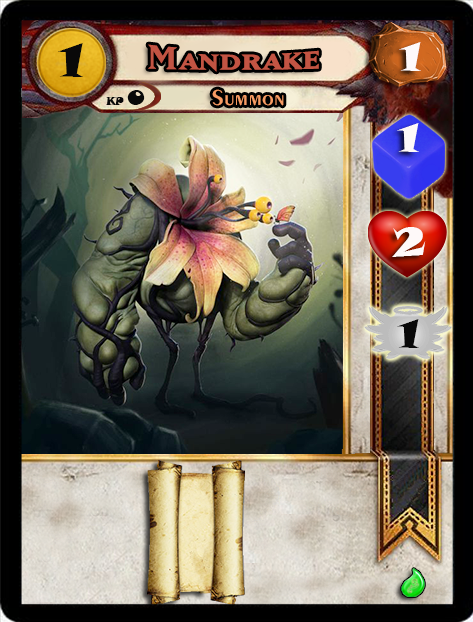
<style>
.page{position:relative;width:473px;height:622px}
.page>*{position:absolute;margin:0}
.t1{font:46.6px "SnapITC-Regular";color:#090909;scale:1.05 1}
.t2{font:40px "MatrixBoldSmallCaps";color:#c25443;scale:1.06 1}
.t3{font:40px "SnapITC-Regular";color:#fef9f9;scale:1.05 1}
.t4{font:22.7px "Exotic350BT-DemiBold";color:#f89c64;scale:1.06 1}
.t5{font:20.5px "SnapITC-Regular";color:#090909}
.t6{font:40px "SnapITC-Regular";color:#090909;scale:1.05 1}
</style>
<div class="page">
<p class="t1" style="left:58px;top:43px;width:25px;height:34px">1</p>
<p class="t2" style="left:148px;top:44px;width:171px;height:28px">Mandrake</p>
<p class="t3" style="left:399px;top:42px;width:22px;height:29px">1</p>
<p class="t4" style="left:212px;top:89px;width:72px;height:17px">Summon</p>
<p class="t5" style="left:127px;top:90px;width:18px;height:15px">0</p>
<p class="t3" style="left:397px;top:123px;width:22px;height:29px">1</p>
<p class="t3" style="left:392px;top:227px;width:34px;height:30px">2</p>
<p class="t6" style="left:397px;top:319px;width:22px;height:29px">1</p>
</div>
